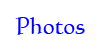
<style>
.page{position:relative;width:100px;height:50px;background:#ffffff}
.page>*{position:absolute;margin:0}
.t1{font:24px "Calligraphic421BT-RomanB";color:#0000ff}
</style>
<div class="page">
<p class="t1" style="left:15px;top:17px;width:70px;height:18px">Photos</p>
</div>
